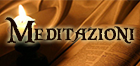
<style>
.page{position:relative;width:140px;height:66px}
.page>*{position:absolute;margin:0}
.t1{font:33.3px "PiecesofEight";color:#190803}
</style>
<div class="page">
<p class="t1" style="left:5px;top:17px;width:130px;height:27px">Meditazioni</p>
</div>
